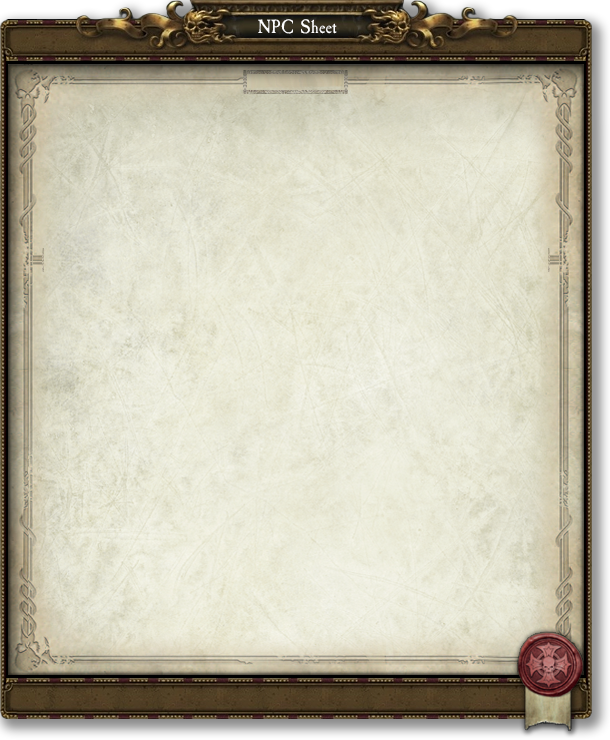
<style>
.page{position:relative;width:610px;height:740px}
.page>*{position:absolute;margin:0}
.t1{font:20px "CaslonAntique";color:#fefefe}
</style>
<div class="page">
<p class="t1" style="left:258px;top:19px;width:79px;height:15px">NPC Sheet</p>
</div>
